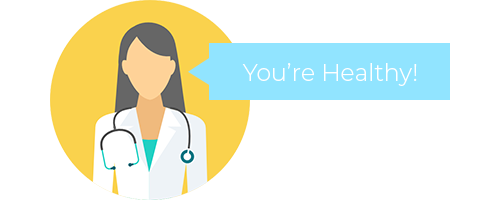
<style>
.page{position:relative;width:500px;height:200px;background:#ffffff}
.page>*{position:absolute;margin:0}
.t1{font:23.8px "Montserrat-Light";color:#ffffff}
</style>
<div class="page">
<p class="t1" style="left:242px;top:63px;width:175px;height:23px">You’re Healthy!</p>
</div>
